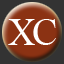
<style>
.page{position:relative;width:64px;height:64px;background:#333333}
.page>*{position:absolute;margin:0}
.t1{font:38.1px "TimesNewRomanPSMT";letter-spacing:-0.09em;color:#ffffff}
</style>
<div class="page">
<p class="t1" style="left:8px;top:19px;width:48px;height:26px">XC</p>
</div>
